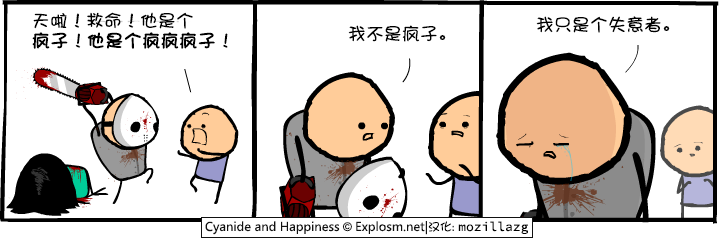
<style>
.page{position:relative;width:720px;height:240px;background:#ffffff}
.page>*{position:absolute;margin:0}
.t1{font:18px/20px "DFPShaoNvW5";color:#000000}
.t2{font:18px/20px "DFPShaoNvW5";color:#000000;font-weight:bold}
.t3{font:18px "DFPShaoNvW5";color:#000000}
</style>
<div class="page">
<p class="t1" style="left:32px;top:12px;width:196px;height:37px">天啦！救命！他是个<br><span class="t2">疯子</span>！<span class="t2">他是个疯疯疯子</span>！</p>
<p class="t3" style="left:536px;top:16px;width:134px;height:17px">我只是个失意者。</p>
<p class="t3" style="left:348px;top:25px;width:98px;height:17px">我不是疯子。</p>
</div>
